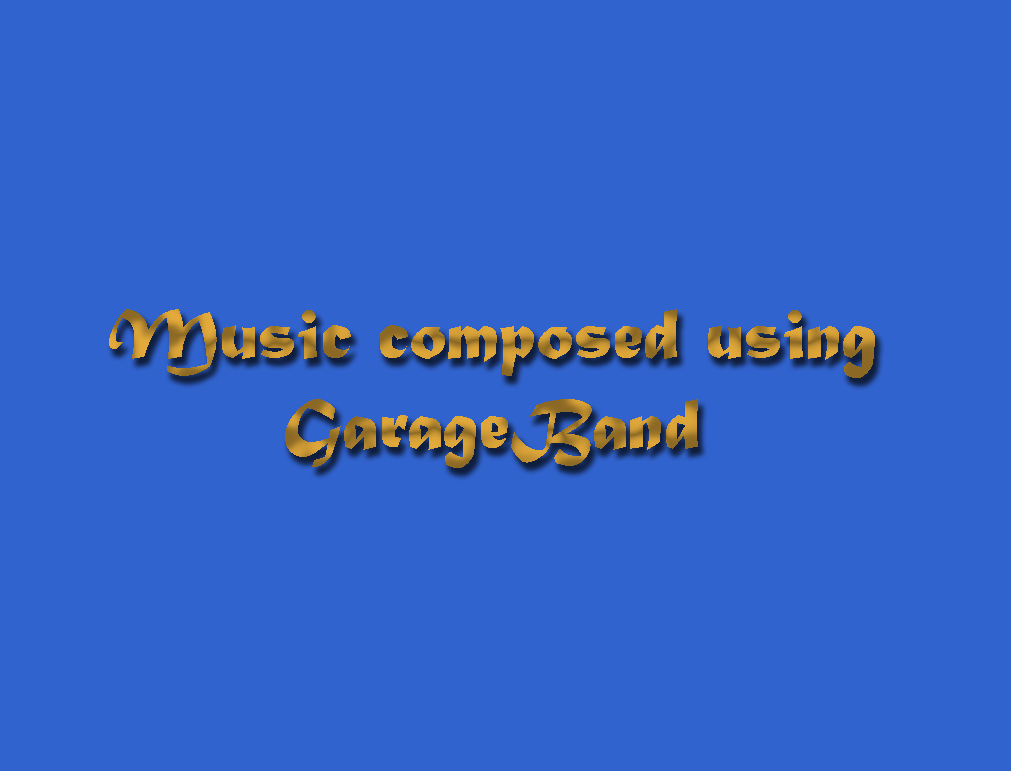
<style>
.page{position:relative;width:1011px;height:771px;background:#3163ce}
.page>*{position:absolute;margin:0}
.t1{font:75px "MaturaMTScriptCapitals"}
</style>
<div class="page">
<p class="t1" style="left:109px;top:309px;width:766px;height:159px;text-align:center">Music composed using<br>GarageBand</p>
</div>
